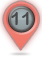
<style>
.page{position:relative;width:42px;height:57px}
.page>*{position:absolute;margin:0}
.t1{font:18px "ArialRoundedMTBold";color:#494949}
</style>
<div class="page">
<p class="t1" style="left:11px;top:12px;width:18px;height:13px">11</p>
</div>
